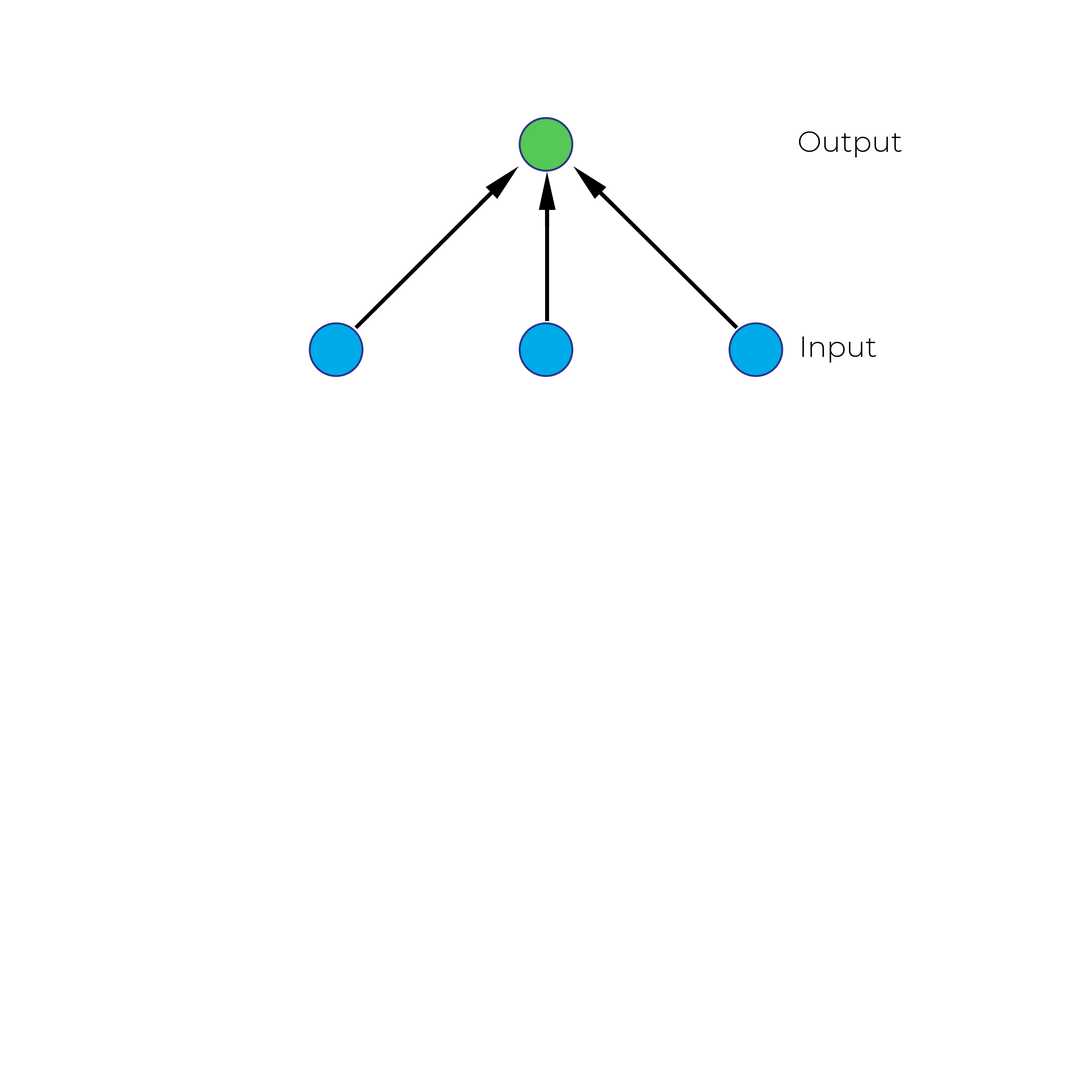
<style>
.page{position:relative;width:1092px;height:1092px;background:#ffffff}
.page>*{position:absolute;margin:0}
.t1{font:28.8px "Montserrat-Light";color:#010000}
</style>
<div class="page">
<p class="t1" style="left:799px;top:131px;width:103px;height:26px">Output</p>
<p class="t1" style="left:802px;top:337px;width:74px;height:26px">Input</p>
</div>
